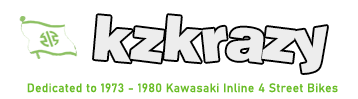
<style>
.page{position:relative;width:358px;height:99px;background:#ffffff}
.page>*{position:absolute;margin:0}
.t1{font:12px "Bahnschrift";letter-spacing:0.025em;color:#69bd27}
</style>
<div class="page">
<p class="t1" style="left:27px;top:83px;width:311px;height:10px">Dedicated to 1973 - 1980 Kawasaki Inline 4 Street Bikes</p>
</div>
